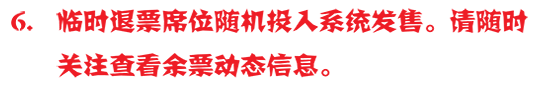
<style>
.page{position:relative;width:542px;height:86px;background:#ffffff}
.page>*{position:absolute;margin:0}
.t1{font:24.7px "FZJZJW--GB1-0";color:#ee1c25;scale:1.06 1}
.t2{font:24.7px/43.7px "FZJZJW--GB1-0";color:#ee1c25;scale:1.06 1}
</style>
<div class="page">
<p class="t1" style="left:11px;top:11px;width:22px;height:20px">6.</p>
<p class="t2" style="left:56px;top:8px;width:472px;height:70px">临时退票席位随机投入系统发售。请随时关注查看余票动态信息。</p>
</div>
